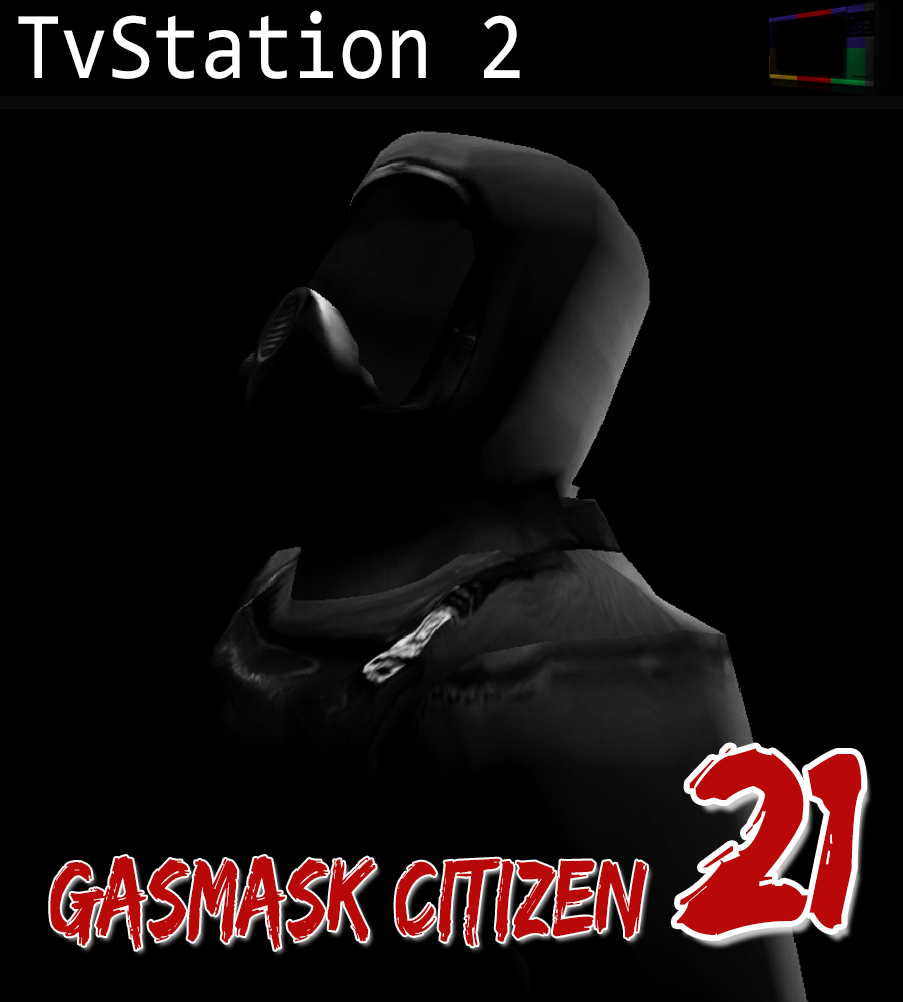
<style>
.page{position:relative;width:903px;height:1002px;background:#000000}
.page>*{position:absolute;margin:0}
.t1{font:96.3px "Consolas";color:#ffffff;scale:0.87 1}
.t2{font:261.3px "EdoSZ";color:#b80808}
.t3{font:113.1px "EdoSZ";color:#b80808;scale:0.74 1}
</style>
<div class="page">
<p class="t1" style="left:18px;top:10px;width:502px;height:69px">TvStation 2</p>
<p class="t2" style="left:676px;top:748px;width:186px;height:187px">21</p>
<p class="t3" style="left:50px;top:856px;width:597px;height:94px">GASMASK CITIZEN</p>
</div>
